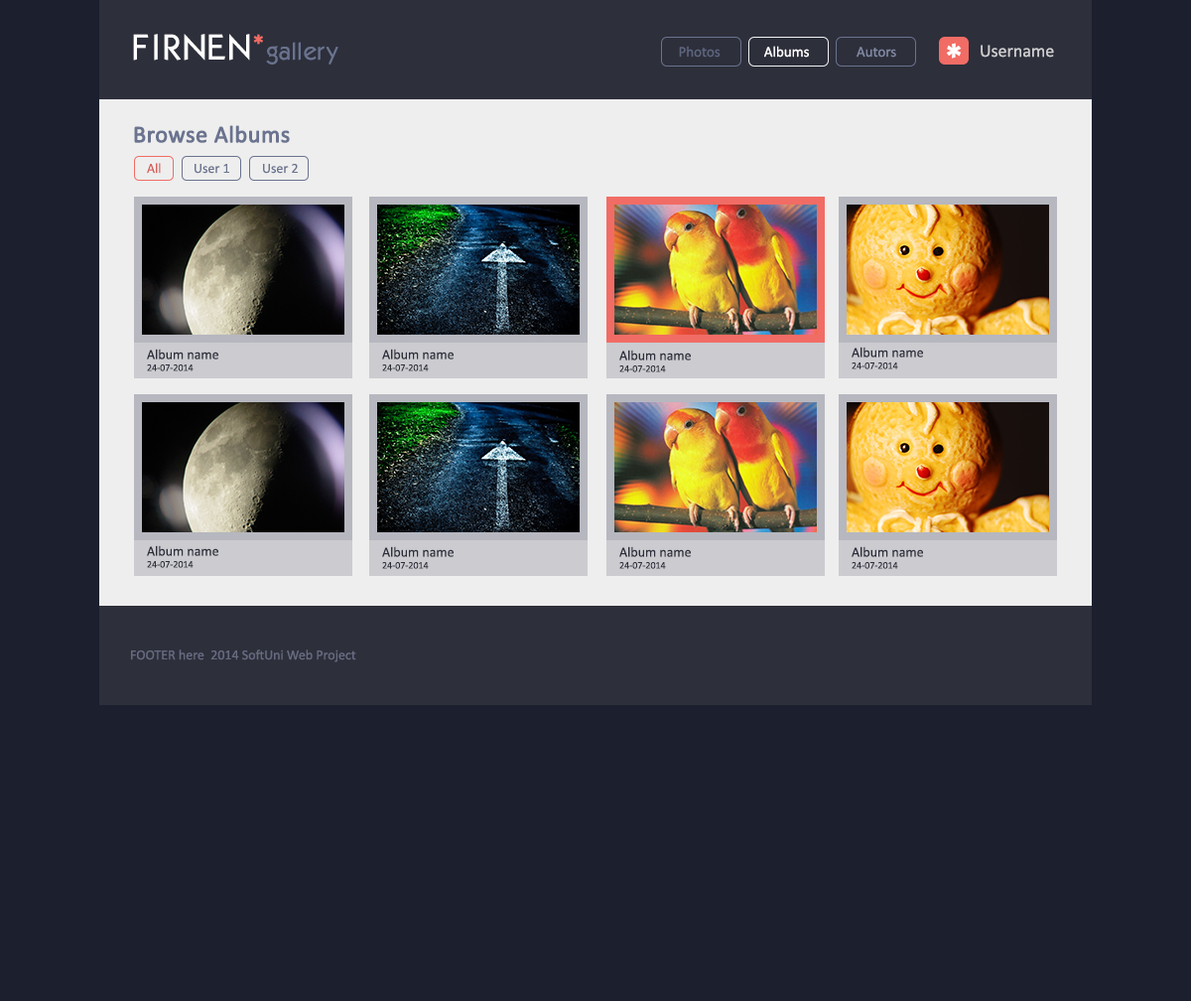
<style>
.page{position:relative;width:1191px;height:1001px;background:#1b1f2e}
.page>*{position:absolute;margin:0}
.t1{font:23.8px "Kabel";letter-spacing:0.05em;color:#6a738f}
.t2{font:35.7px "Kabel";letter-spacing:0.05em;color:#ffffff}
.t3{font:35.7px "Kabel";letter-spacing:0.075em;color:#ffffff}
.t4{font:35.7px "Kabel";letter-spacing:0.01em;color:#ffffff}
.t5{font:35.7px "Kabel";letter-spacing:0.025em;color:#ffffff}
.t6{font:35.7px "Kabel";color:#ffffff}
.t7{font:35.7px "Kabel";color:#f16c65}
.t8{font:23.8px "Kabel";color:#6a738f}
.t9{font:23.8px "Kabel";letter-spacing:-0.01em;color:#6a738f}
.t10{font:14.9px "Calibri";color:#5d657e}
.t11{font:14.9px "Calibri";color:#ffffff}
.t12{font:14.9px "Calibri";color:#8088a3}
.t13{font:35.7px "KabelCTT-Ultra";color:#ffffff}
.t14{font:17.9px "Calibri";color:#ceced0}
.t15{font:23.8px "Calibri";color:#6a738f;font-weight:bold}
.t16{font:13.9px "Calibri";color:#d6625e}
.t17{font:13.9px "Calibri";color:#6a738f}
.t18{font:13.9px "Calibri";color:#2d2f3b}
.t19{font:9.9px "Calibri";color:#2d2f3b}
.t20{font:13.9px "Calibri";color:#676b80}
</style>
<div class="page">
<p class="t1" style="left:133px;top:34px;width:206px;height:31px"><span class="t2">F</span><span class="t3">I</span><span class="t4">R</span><span class="t5">NE</span><span class="t6">N</span><span class="t7">*</span><span class="t8">g</span>all<span class="t9">e</span><span class="t8">ry</span></p>
<p class="t10" style="left:679px;top:46px;width:218px;height:12px">Photos             <span class="t11">Albums              </span><span class="t12">Autors</span></p>
<p class="t13" style="left:946px;top:43px;width:16px;height:16px">*</p>
<p class="t14" style="left:981px;top:45px;width:73px;height:13px">Username</p>
<p class="t15" style="left:134px;top:125px;width:156px;height:18px">Browse Albums</p>
<p class="t16" style="left:147px;top:163px;width:14px;height:11px">All</p>
<p class="t17" style="left:195px;top:164px;width:34px;height:10px">User 1</p>
<p class="t17" style="left:263px;top:164px;width:35px;height:10px">User 2</p>
<p class="t18" style="left:147px;top:349px;width:71px;height:22px">Album name<br><span class="t19">24-07-2014</span></p>
<p class="t18" style="left:382px;top:349px;width:72px;height:22px">Album name<br><span class="t19">24-07-2014</span></p>
<p class="t18" style="left:620px;top:349px;width:71px;height:23px">Album name<br><span class="t19">24-07-2014</span></p>
<p class="t18" style="left:852px;top:347px;width:71px;height:22px">Album name<br><span class="t19">24-07-2014</span></p>
<p class="t18" style="left:147px;top:545px;width:71px;height:23px">Album name<br><span class="t19">24-07-2014</span></p>
<p class="t18" style="left:382px;top:546px;width:72px;height:23px">Album name<br><span class="t19">24-07-2014</span></p>
<p class="t18" style="left:620px;top:546px;width:71px;height:23px">Album name<br><span class="t19">24-07-2014</span></p>
<p class="t18" style="left:852px;top:546px;width:71px;height:23px">Album name<br><span class="t19">24-07-2014</span></p>
<p class="t20" style="left:131px;top:649px;width:225px;height:13px">FOOTER here  2014 SoftUni Web Project</p>
</div>
